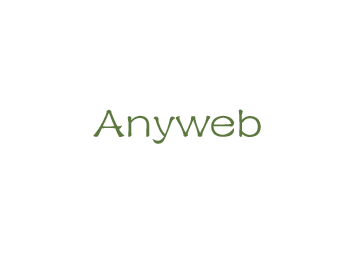
<style>
.page{position:relative;width:360px;height:270px;background:#ffffff}
.page>*{position:absolute;margin:0}
.t1{font:48px "FZSTK--GBK1-0";color:#5c783e}
</style>
<div class="page">
<p class="t1" style="left:93px;top:109px;width:168px;height:35px">Anyweb</p>
</div>
